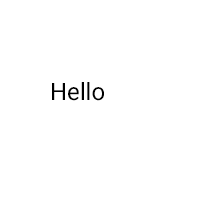
<style>
.page{position:relative;width:200px;height:200px;background:#ffffff}
.page>*{position:absolute;margin:0}
.t1{font:24px "Roboto-Regular";color:#000000}
</style>
<div class="page">
<p class="t1" style="left:52px;top:82px;width:52px;height:19px">Hello</p>
</div>
